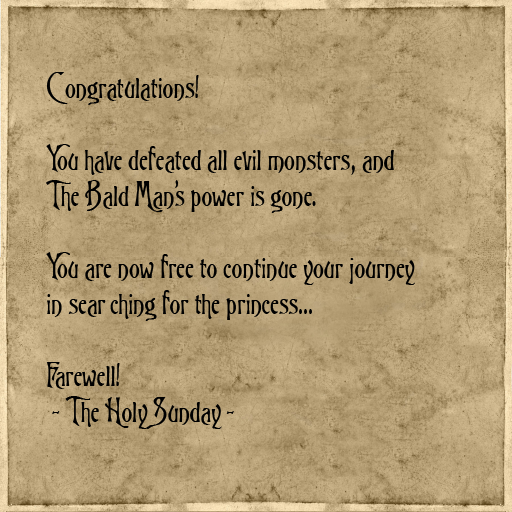
<style>
.page{position:relative;width:512px;height:512px}
.page>*{position:absolute;margin:0}
.t1{font:30px "TriniganFG";color:#000000}
</style>
<div class="page">
<p class="t1" style="left:46px;top:72px;width:369px;height:357px">Congratulations!<br><br>You have defeated all evil monsters, and <br>The Bald Man’s power is gone. <br><br>You are now free to continue your journey<br>in searching for the princess...<br><br>Farewell!<br> - The Holy Sunday -</p>
</div>
